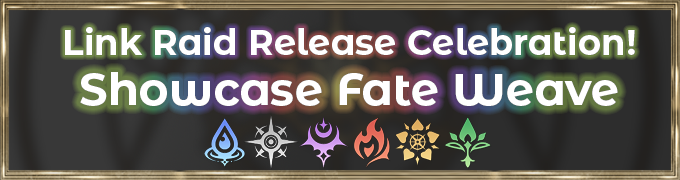
<style>
.page{position:relative;width:680px;height:180px}
.page>*{position:absolute;margin:0}
.t1{font:35.3px "MontserratAlternates-Bold";color:#ffffff}
.t2{font:44.9px "MontserratAlternates-Bold";color:#ffffff}
</style>
<div class="page">
<p class="t1" style="left:65px;top:27px;width:570px;height:28px">Link Raid Release Celebration!</p>
<p class="t2" style="left:80px;top:72px;width:538px;height:34px">Showcase Fate Weave</p>
</div>
